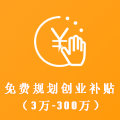
<style>
.page{position:relative;width:120px;height:120px}
.page>*{position:absolute;margin:0}
.t1{font:13.6px/17px "System";letter-spacing:0.065em;color:#ffffff;text-transform:uppercase;font-weight:bold;scale:0.96 1}
</style>
<div class="page">
<p class="t1" style="left:4px;top:82px;width:111px;height:29px">免费规划创业补贴<br>   （3万-300万）</p>
</div>
